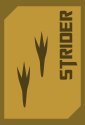
<style>
.page{position:relative;width:85px;height:125px;background:#bf9739}
.page>*{position:absolute;margin:0}
.t1{font:20px "TransformersMovie";letter-spacing:0.04em;color:#4c3f17}
.t2{font:20px "TransformersMovie";letter-spacing:0.02em;color:#4c3f17}
.t3{font:20px "TransformersMovie";letter-spacing:0.06em;color:#4c3f17}
</style>
<div class="page">
<p class="t1" style="left:59px;top:10px;width:19px;height:70px;rotate:-90deg">st<span class="t2">r</span><span class="t3">i</span><span class="t2">d</span>er</p>
</div>
